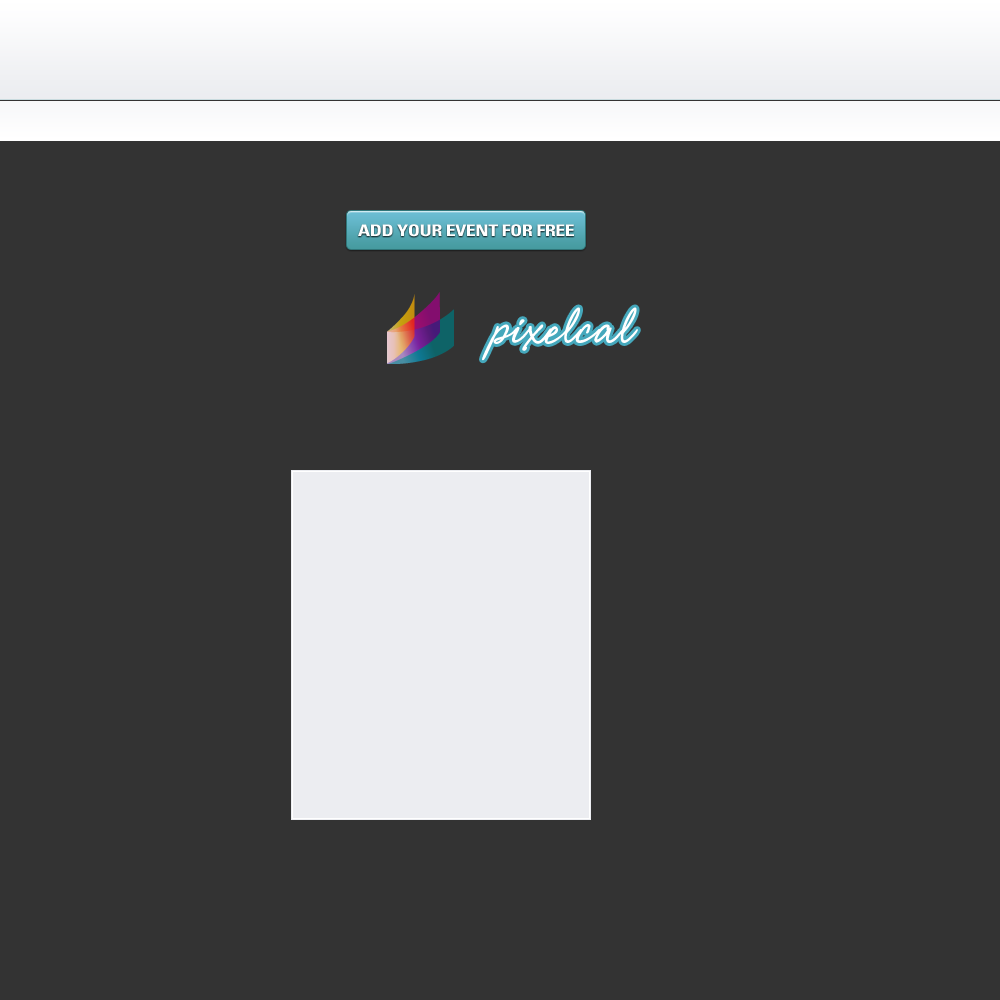
<style>
.page{position:relative;width:1000px;height:1000px;background:#333333}
.page>*{position:absolute;margin:0}
.t1{font:16px "UniversLTStd-BoldCn";letter-spacing:-0.025em;color:#ffffff;scale:1.25 1}
.t2{font:67.9px "ShimmerBold";letter-spacing:0.025em;color:#ffffff}
</style>
<div class="page">
<p class="t1" style="left:358px;top:224px;width:216px;height:13px">ADD YOUR EVENT FOR FREE</p>
<p class="t2" style="left:482px;top:307px;width:156px;height:54px">pixelcal</p>
</div>
